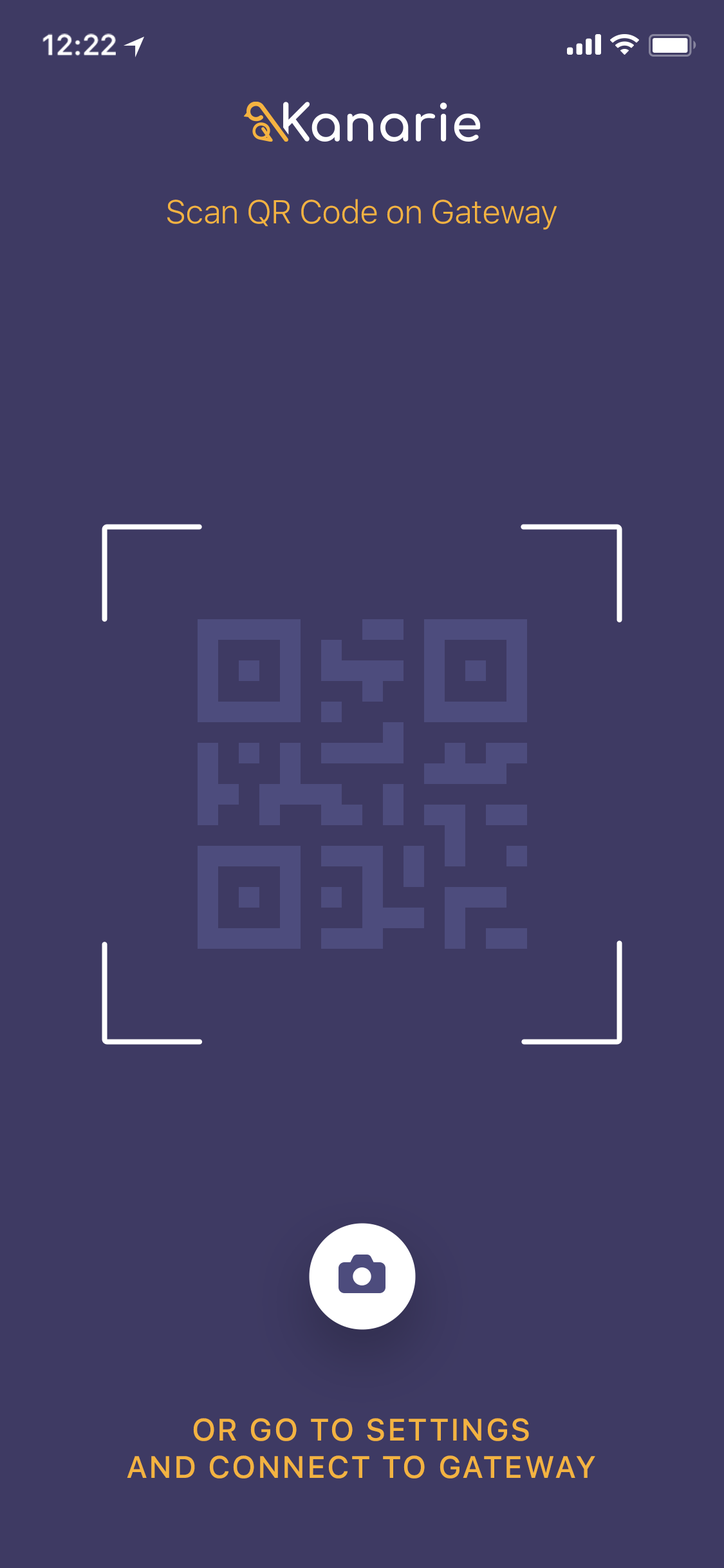
<style>
.page{position:relative;width:724px;height:1568px;background:#3e3a63}
.page>*{position:absolute;margin:0}
.t1{font:29px "SFProText-Semibold";letter-spacing:-0.02em;color:#ffffff}
.t2{font:32.8px "SFProText-Light";letter-spacing:-0.024em;color:#f3b341}
.t3{font:30.9px "SFProText-Medium";letter-spacing:0.05em;color:#f3b341;text-transform:uppercase}
</style>
<div class="page">
<p class="t1" style="left:42px;top:33px;width:74px;height:23px">12:22</p>
<p class="t2" style="left:167px;top:199px;width:390px;height:31px">Scan QR Code on Gateway</p>
<p class="t3" style="left:127px;top:1418px;width:468px;height:61px;text-align:center">Or go to settings<br>and connect to Gateway</p>
</div>
